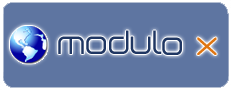
<style>
.page{position:relative;width:231px;height:90px;background:#5e75a1}
.page>*{position:absolute;margin:0}
.t1{font:30px "Birdman";color:#1f3662}
.t2{font:30px "Birdman";color:#df7512}
</style>
<div class="page">
<p class="t1" style="left:58px;top:30px;width:159px;height:25px">Modulo <span class="t2">x</span></p>
</div>
